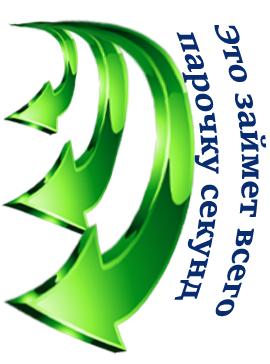
<style>
.page{position:relative;width:270px;height:364px;background:#ffffff}
.page>*{position:absolute;margin:0}
.t1{font:33.3px "SitkaText-Bold";color:#072c70}
</style>
<div class="page">
<p class="t1" style="left:174px;top:25px;width:93px;height:292px;text-align:center;rotate:90deg">Это займет всего<br>парoчку секунд</p>
</div>
